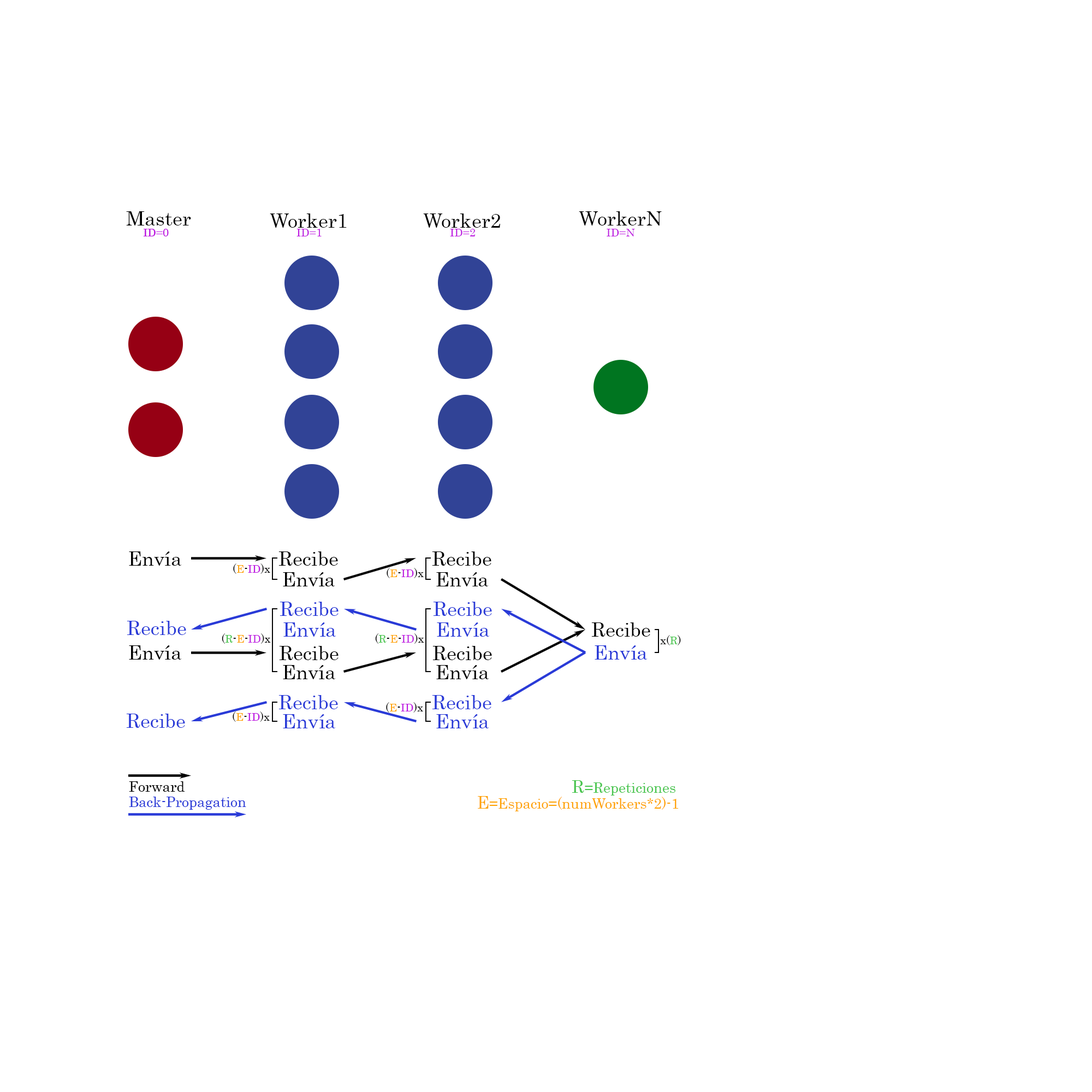
<style>
.page{position:relative;width:1092px;height:1092px;background:#ffffff}
.page>*{position:absolute;margin:0}
.t1{font:19.7px "Century";color:#000000}
.t2{font:10.9px "Century";color:#be1ae1}
.t3{font:10.9px "Century";color:#000000}
.t4{font:10.9px "Century";color:#ffa200}
.t5{font:19.7px "Century";color:#293ad7}
.t6{font:10.9px "Century";color:#47c54d}
.t7{font:14.2px "Century";color:#000000}
.t8{font:14.2px "Century";color:#47c54d}
.t9{font:17.5px "Century";color:#47c54d}
.t10{font:14.2px "Century";color:#293ad7}
.t11{font:14.2px "Century";color:#ffa200}
.t12{font:17.5px "Century";color:#ffa200}
</style>
<div class="page">
<p class="t1" style="left:126px;top:211px;width:65px;height:14px">Master</p>
<p class="t1" style="left:270px;top:213px;width:77px;height:15px">Worker1</p>
<p class="t1" style="left:423px;top:213px;width:77px;height:15px">Worker2</p>
<p class="t1" style="left:579px;top:211px;width:83px;height:14px">WorkerN</p>
<p class="t2" style="left:143px;top:229px;width:26px;height:7px">ID=0</p>
<p class="t2" style="left:143px;top:229px;width:26px;height:7px">ID=0</p>
<p class="t2" style="left:296px;top:229px;width:26px;height:7px">ID=1</p>
<p class="t2" style="left:450px;top:229px;width:25px;height:7px">ID=2</p>
<p class="t2" style="left:607px;top:229px;width:28px;height:7px">ID=N</p>
<p class="t1" style="left:129px;top:551px;width:52px;height:15px">Envía</p>
<p class="t1" style="left:278px;top:551px;width:60px;height:15px">Recibe</p>
<p class="t1" style="left:432px;top:551px;width:59px;height:15px">Recibe</p>
<p class="t2" style="left:233px;top:563px;width:37px;height:11px"><span class="t3">(</span><span class="t4">E</span><span class="t3">-</span>ID<span class="t3">)x</span></p>
<p class="t2" style="left:387px;top:568px;width:37px;height:10px"><span class="t3">(</span><span class="t4">E</span><span class="t3">-</span>ID<span class="t3">)x</span></p>
<p class="t1" style="left:283px;top:572px;width:52px;height:14px">Envía</p>
<p class="t1" style="left:436px;top:572px;width:52px;height:14px">Envía</p>
<p class="t5" style="left:280px;top:602px;width:59px;height:14px">Recibe</p>
<p class="t5" style="left:433px;top:602px;width:59px;height:14px">Recibe</p>
<p class="t5" style="left:127px;top:621px;width:59px;height:14px">Recibe</p>
<p class="t5" style="left:283px;top:622px;width:53px;height:15px">Envía</p>
<p class="t5" style="left:437px;top:622px;width:52px;height:15px">Envía</p>
<p class="t1" style="left:591px;top:622px;width:59px;height:15px">Recibe</p>
<p class="t2" style="left:222px;top:633px;width:49px;height:11px"><span class="t3">(</span><span class="t6">R</span><span class="t3">-</span><span class="t4">E</span><span class="t3">-</span>ID<span class="t3">)x</span></p>
<p class="t2" style="left:375px;top:633px;width:49px;height:11px"><span class="t3">(</span><span class="t6">R</span><span class="t3">-</span><span class="t4">E</span><span class="t3">-</span>ID<span class="t3">)x</span></p>
<p class="t3" style="left:660px;top:635px;width:21px;height:10px">x(<span class="t6">R</span>)</p>
<p class="t1" style="left:129px;top:645px;width:52px;height:15px">Envía</p>
<p class="t1" style="left:279px;top:646px;width:60px;height:14px">Recibe</p>
<p class="t1" style="left:432px;top:646px;width:60px;height:14px">Recibe</p>
<p class="t5" style="left:595px;top:645px;width:52px;height:15px">Envía</p>
<p class="t1" style="left:283px;top:665px;width:52px;height:14px">Envía</p>
<p class="t1" style="left:436px;top:665px;width:53px;height:14px">Envía</p>
<p class="t5" style="left:278px;top:695px;width:60px;height:14px">Recibe</p>
<p class="t5" style="left:432px;top:695px;width:59px;height:14px">Recibe</p>
<p class="t5" style="left:126px;top:714px;width:59px;height:14px">Recibe</p>
<p class="t2" style="left:233px;top:711px;width:37px;height:11px"><span class="t3">(</span><span class="t4">E</span><span class="t3">-</span>ID<span class="t3">)x</span></p>
<p class="t2" style="left:386px;top:702px;width:37px;height:11px"><span class="t3">(</span><span class="t4">E</span><span class="t3">-</span>ID<span class="t3">)x</span></p>
<p class="t5" style="left:283px;top:714px;width:52px;height:14px">Envía</p>
<p class="t5" style="left:436px;top:714px;width:53px;height:14px">Envía</p>
<p class="t7" style="left:129px;top:781px;width:56px;height:11px">Forward</p>
<p class="t8" style="left:572px;top:780px;width:103px;height:16px"><span class="t9">R</span>=Repeticiones</p>
<p class="t10" style="left:129px;top:797px;width:117px;height:13px">Back-Propagation</p>
<p class="t11" style="left:478px;top:796px;width:201px;height:15px"><span class="t12">E</span>=Espacio=(numWorkers*2)-1</p>
</div>
